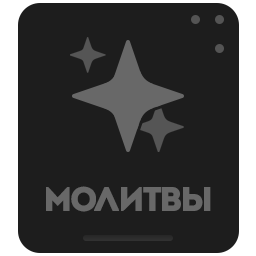
<style>
.page{position:relative;width:256px;height:256px;background:#1d1d1d}
.page>*{position:absolute;margin:0}
.t1{font:34.3px "IntroFriday";color:#686868}
</style>
<div class="page">
<p class="t1" style="left:46px;top:186px;width:165px;height:26px">МОЛИТВЫ</p>
</div>
